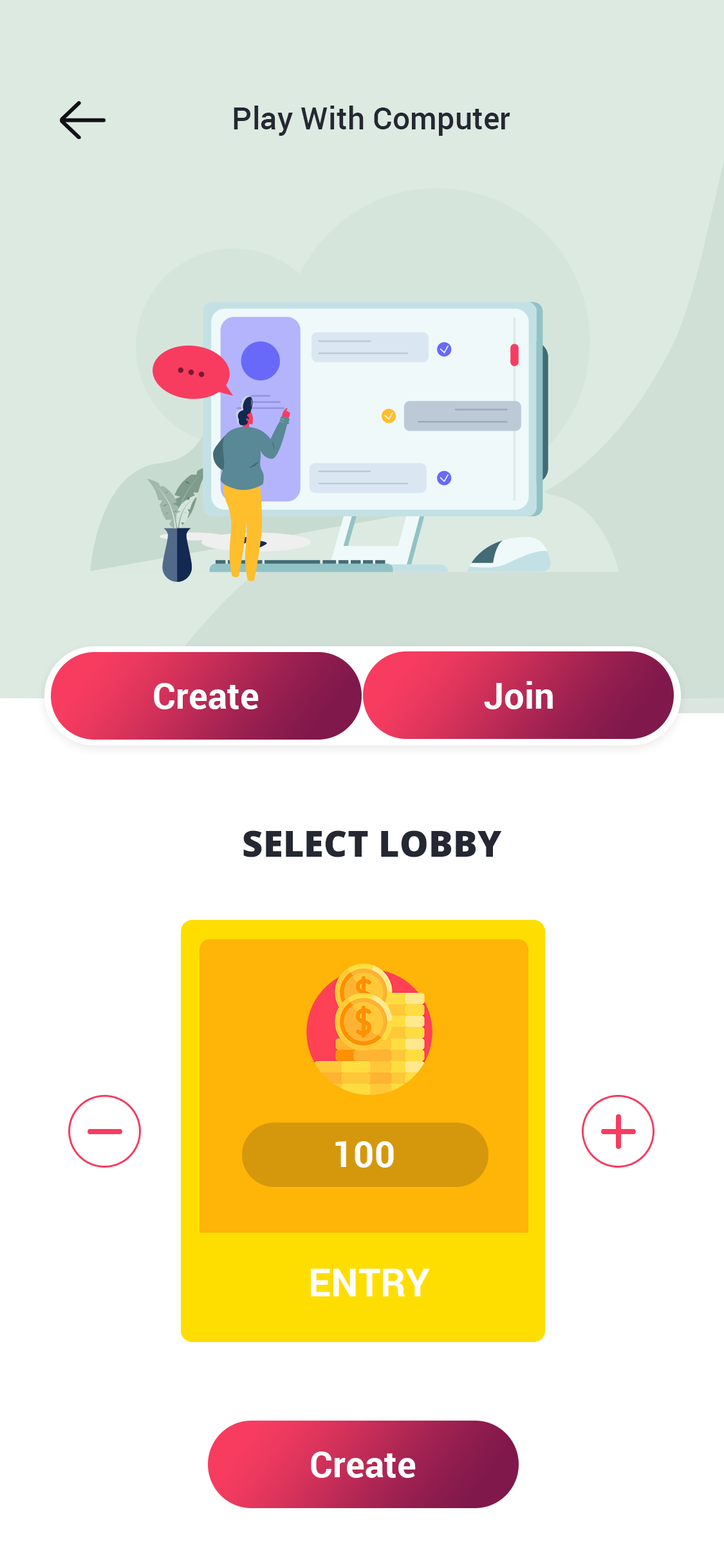
<style>
.page{position:relative;width:724px;height:1568px;background:#ffffff}
.page>*{position:absolute;margin:0}
.t1{font:30.9px "Roboto-Medium";letter-spacing:0.005em;color:#252832}
.t2{font:36px "Roboto-Bold";letter-spacing:0.005em;color:#ffffff}
.t3{font:36px "Roboto-Bold";letter-spacing:0.005em}
.t4{font:36px "OpenSans-Extrabold";letter-spacing:0.005em;color:#252832}
.t5{font:38.6px "Roboto-Bold";letter-spacing:0.005em;color:#ffffff;text-transform:uppercase}
</style>
<div class="page">
<p class="t1" style="left:234px;top:106px;width:276px;height:30px">Play With Computer</p>
<p class="t2" style="left:154px;top:683px;width:105px;height:26px">Create</p>
<p class="t3" style="left:473px;top:681px;width:69px;height:28px">Join</p>
<p class="t2" style="left:484px;top:681px;width:69px;height:28px">Join</p>
<p class="t4" style="left:243px;top:830px;width:259px;height:27px">SELECT LOBBY</p>
<p class="t2" style="left:335px;top:1141px;width:59px;height:27px">100</p>
<p class="t5" style="left:311px;top:1269px;width:119px;height:27px">Entry</p>
<p class="t2" style="left:311px;top:1451px;width:105px;height:27px">Create</p>
</div>
